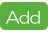
<style>
.page{position:relative;width:48px;height:32px;background:#59b03f}
.page>*{position:absolute;margin:0}
.t1{font:16px "HGMaruGothicMPRO";color:#ffffff}
</style>
<div class="page">
<p class="t1" style="left:6px;top:10px;width:34px;height:14px">Add</p>
</div>
